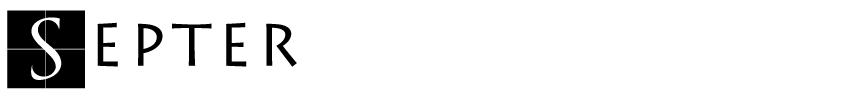
<style>
.page{position:relative;width:863px;height:99px;background:#ffffff}
.page>*{position:absolute;margin:0}
.t1{font:80px "TrajanusBriX-Invers";letter-spacing:0.1em;color:#000000}
.t2{font:60px "LithosPro-Regular";letter-spacing:0.1em;color:#000000}
</style>
<div class="page">
<p class="t1" style="left:7px;top:10px;width:78px;height:79px">S</p>
<p class="t2" style="left:97px;top:22px;width:200px;height:45px">EPTER</p>
</div>
